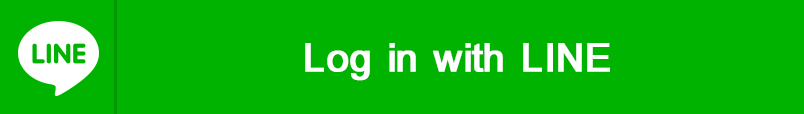
<style>
.page{position:relative;width:804px;height:114px;background:#00b300}
.page>*{position:absolute;margin:0}
.t1{font:60px "BrowalliaNew";letter-spacing:-0.01em;color:#ffffff;font-weight:bold}
</style>
<div class="page">
<p class="t1" style="left:305px;top:43px;width:305px;height:38px">Log in with LINE</p>
</div>
